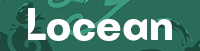
<style>
.page{position:relative;width:200px;height:51px;background:#296c59}
.page>*{position:absolute;margin:0}
.t1{font:46px "Batangas-Bold";color:#ffffff}
</style>
<div class="page">
<p class="t1" style="left:28px;top:8px;width:144px;height:33px">Locean</p>
</div>
